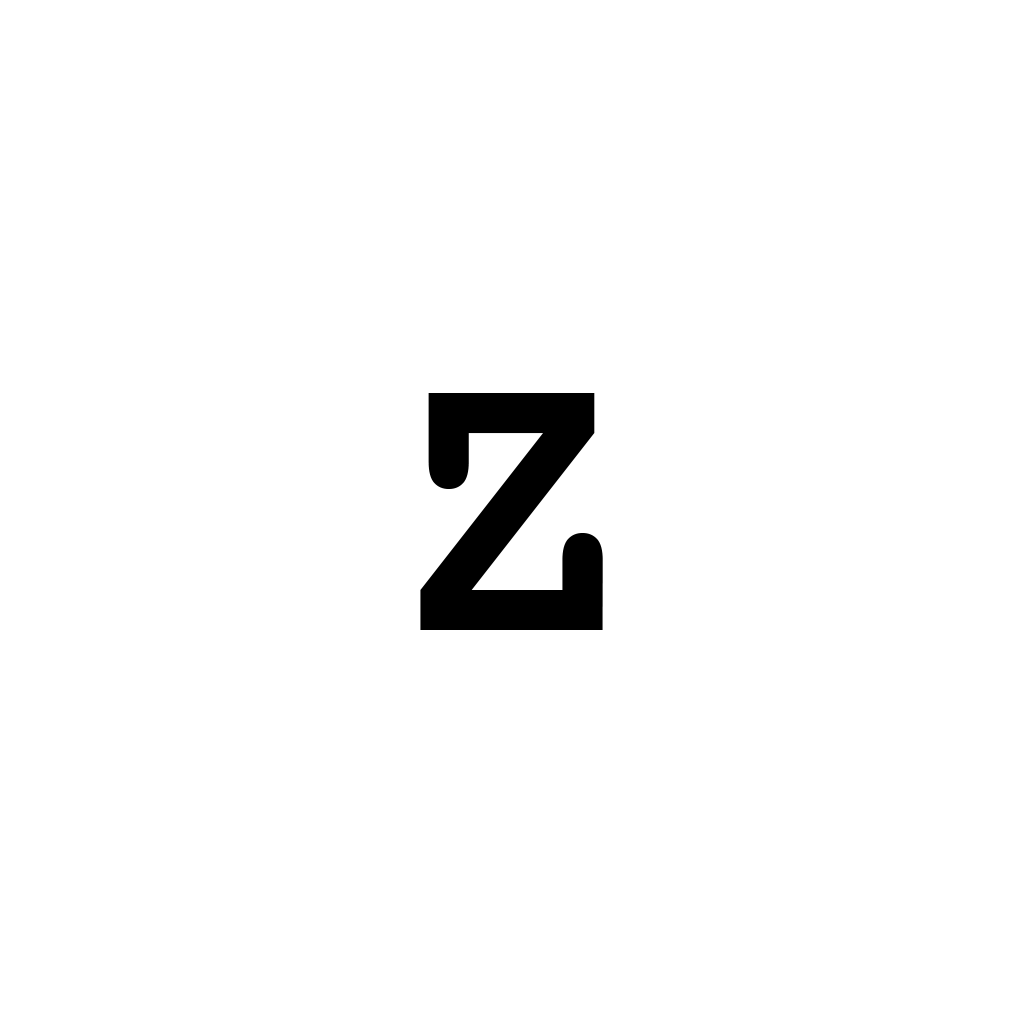
<style>
.page{position:relative;width:1024px;height:1024px;background:#ffffff}
.page>*{position:absolute;margin:0}
.t1{font:400px "CourierNewPS-BoldMT";color:#000000}
</style>
<div class="page">
<p class="t1" style="left:420px;top:393px;width:183px;height:237px">Z</p>
</div>
